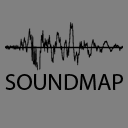
<style>
.page{position:relative;width:128px;height:128px;background:#808080}
.page>*{position:absolute;margin:0}
.t1{font:23.3px "MyriadPro-Regular";color:#000000}
</style>
<div class="page">
<p class="t1" style="left:5px;top:74px;width:118px;height:16px">SOUNDMAP</p>
</div>
